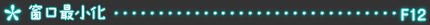
<style>
.page{position:relative;width:430px;height:25px;background:#333333}
.page>*{position:absolute;margin:0}
.t1{font:18px "¢è?";color:#ffffff}
</style>
<div class="page">
<p class="t1" style="left:29px;top:4px;width:76px;height:16px">窗口最小化</p>
</div>
